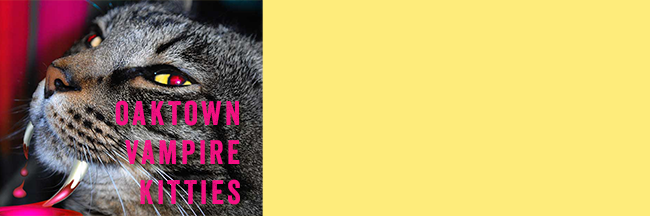
<style>
.page{position:relative;width:650px;height:216px;background:#feec7b}
.page>*{position:absolute;margin:0}
.t1{font:33px "Veneer";letter-spacing:0.1em;color:#f60f83}
</style>
<div class="page">
<p class="t1" style="left:115px;top:100px;width:125px;height:105px;text-align:right">oaktown <br>vampire <br>Kitties</p>
</div>
